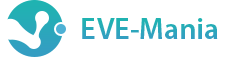
<style>
.page{position:relative;width:240px;height:57px;background:#ffffff}
.page>*{position:absolute;margin:0}
.t1{font:30px "MyriadPro-Semibold";color:#3692b1}
</style>
<div class="page">
<p class="t1" style="left:82px;top:18px;width:136px;height:21px">EVE-Mania</p>
</div>
